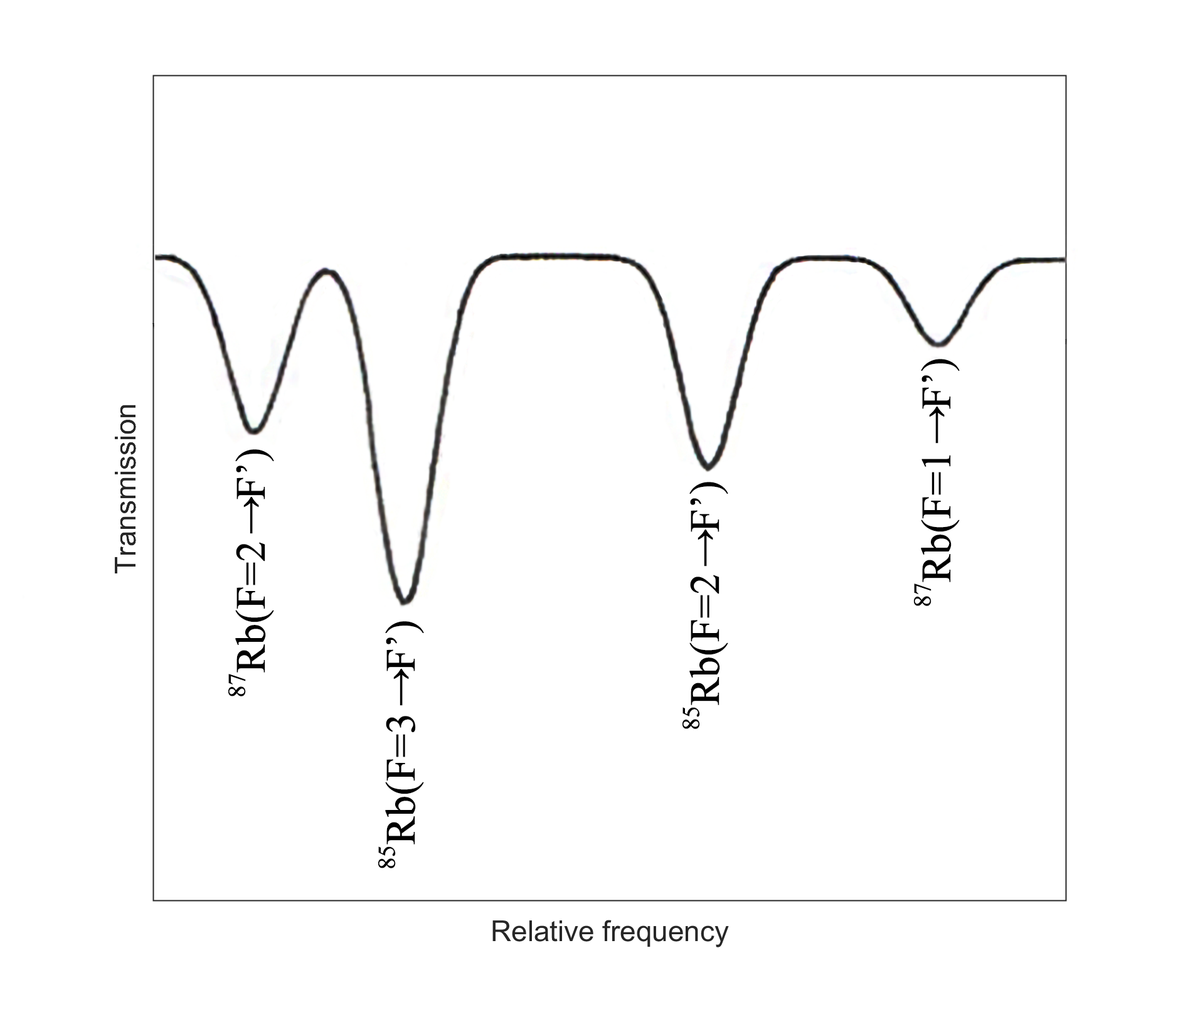
<style>
.page{position:relative;width:1178px;height:1012px;background:#ffffff}
.page>*{position:absolute;margin:0}
.t1{font:41.8px "TimesNewRomanPSMT";letter-spacing:-0.02em;color:#000000;font-weight:bold}
</style>
<div class="page">
<p class="t1" style="left:914px;top:359px;width:46px;height:247px;rotate:180deg">87Rb(F=1↓F’)</p>
<p class="t1" style="left:228px;top:449px;width:46px;height:247px;rotate:180deg">87Rb(F=2↓F’)</p>
<p class="t1" style="left:683px;top:482px;width:45px;height:247px;rotate:180deg">85Rb(F=2↓F’)</p>
<p class="t1" style="left:378px;top:621px;width:46px;height:247px;rotate:180deg">85Rb(F=3↓F’)</p>
</div>
